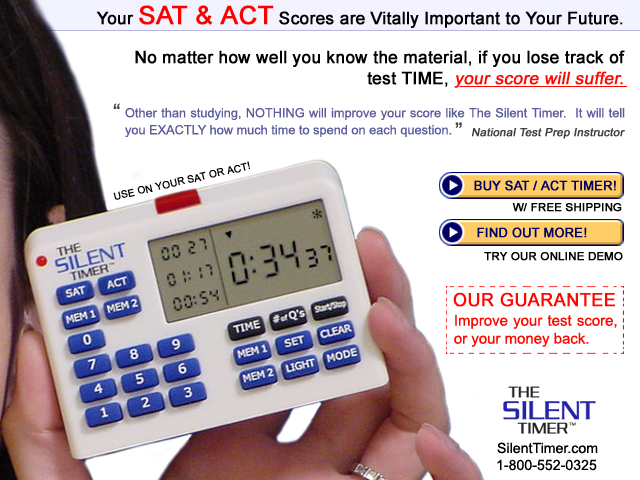
<style>
.page{position:relative;width:640px;height:480px;background:#ffffff}
.page>*{position:absolute;margin:0}
.t1{font:17px "ArialMT";color:#000000;font-weight:bold}
.t2{font:25.5px "ArialMT";color:#ff0000;font-weight:bold}
.t3{font:17px "ArialMT";color:#ff0700;font-weight:bold;font-style:italic}
.t4{font:22.7px "ArialMT";color:#404040}
.t5{font:12.8px/17px "ArialMT";color:#5c5c9d}
.t6{font:11.3px "ArialMT";color:#404040;font-weight:bold;font-style:italic}
.t7{font:9.9px "ArialMT";color:#000000;text-transform:uppercase;font-weight:bold}
.t8{font:12.8px "ArialMT";color:#000066;text-transform:uppercase;font-weight:bold}
.t9{font:11.3px "ArialMT";color:#000000;text-transform:uppercase;font-weight:bold}
.t10{font:18px "ArialMT";color:#ff0700;font-weight:bold}
.t11{font:15px "ArialMT";color:#ff0700}
.t12{font:14.2px "ArialMT";color:#000000}
</style>
<div class="page">
<p class="t1" style="left:96px;top:5px;width:527px;height:23px">Your <span class="t2">SAT &amp; ACT</span> Scores are Vitally Important to Your Future.</p>
<p class="t1" style="left:135px;top:50px;width:490px;height:38px;text-align:right">No matter how well you know the material, if you lose track of test TIME, <span class="t3">your score will suffer.</span></p>
<p class="t4" style="left:113px;top:103px;width:7px;height:6px">“</p>
<p class="t5" style="left:125px;top:107px;width:500px;height:30px;text-align:justify">Other than studying, NOTHING will improve your score like The Silent Timer.  It will tell you EXACTLY how much time to spend on each question.</p>
<p class="t4" style="left:455px;top:122px;width:7px;height:6px">”</p>
<p class="t6" style="left:471px;top:128px;width:154px;height:11px">National Test Prep Instructor</p>
<p class="t7" style="left:113px;top:161px;width:137px;height:39px;rotate:-13deg">Use on your SAT or ACT!</p>
<p class="t8" style="left:474px;top:180px;width:142px;height:11px">Buy SAT / ACT Timer!</p>
<p class="t9" style="left:512px;top:203px;width:110px;height:9px">W/ Free Shipping</p>
<p class="t8" style="left:477px;top:227px;width:110px;height:11px">Find out more!</p>
<p class="t9" style="left:484px;top:252px;width:139px;height:9px">Try our online demo</p>
<p class="t10" style="left:453px;top:292px;width:162px;height:15px">OUR GUARANTEE</p>
<p class="t11" style="left:454px;top:314px;width:163px;height:33px;text-align:justify">Improve your test score, or your money back.</p>
<p class="t12" style="left:497px;top:442px;width:101px;height:12px">SilentTimer.com</p>
<p class="t12" style="left:497px;top:459px;width:100px;height:12px">1-800-552-0325</p>
</div>
